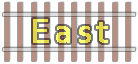
<style>
.page{position:relative;width:138px;height:64px;background:#ffffff}
.page>*{position:absolute;margin:0}
.t1{font:35px "Corbel";letter-spacing:0.13em;font-weight:bold}
</style>
<div class="page">
<p class="t1" style="left:33px;top:19px;width:75px;height:24px">East</p>
</div>
